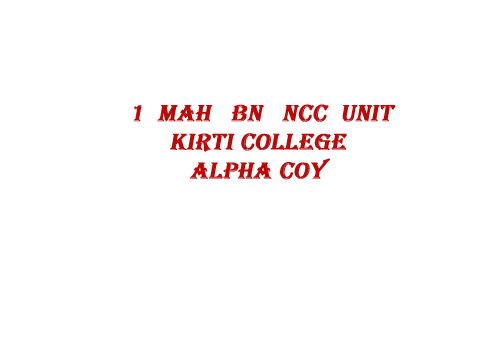
<style>
.page{position:relative;width:504px;height:360px;background:#ffffff}
.page>*{position:absolute;margin:0}
.t1{font:24px "Algerian";color:#bd0808;font-weight:bold;font-style:italic}
</style>
<div class="page">
<p class="t1" style="left:133px;top:104px;width:263px;height:76px">1  MAH   BN   NCC  UNIT <br>      KIRTI COLLEGE<br>         ALPHA COY</p>
</div>
